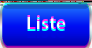
<style>
.page{position:relative;width:92px;height:48px}
.page>*{position:absolute;margin:0}
.t1{font:20.5px "MyriadPro-Semibold";scale:0.96 1}
</style>
<div class="page">
<p class="t1" style="left:27px;top:15px;width:39px;height:14px">Liste</p>
</div>
